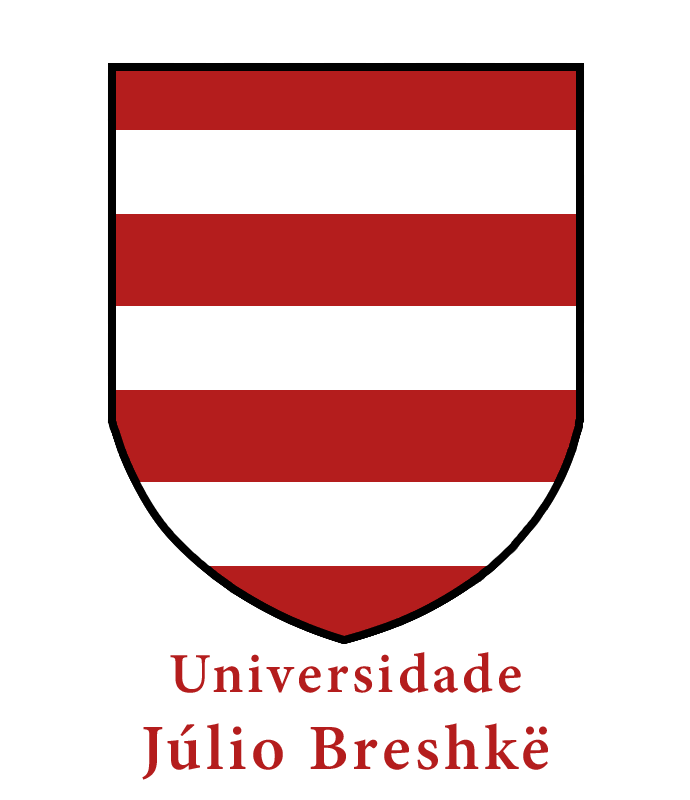
<style>
.page{position:relative;width:690px;height:800px;background:#ffffff}
.page>*{position:absolute;margin:0}
.t1{font:64.6px "MinionConceptRoman-Semibold";letter-spacing:0.065em;color:#b41d1d}
.t2{font:56.6px "MinionConceptRoman-Semibold";letter-spacing:0.065em;color:#b41d1d}
.t3{font:62.6px "MinionConceptRoman-Semibold";letter-spacing:0.065em;color:#b41d1d}
</style>
<div class="page">
<p class="t1" style="left:142px;top:652px;width:406px;height:128px;text-align:center"><span class="t2">Universidade<br></span>Júlio Breshkë<br><span class="t3">Júlio Breshkë</span></p>
</div>
